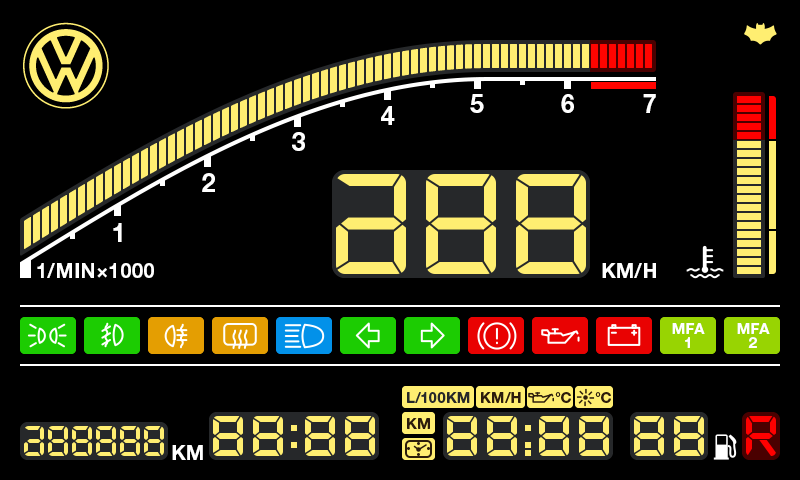
<style>
.page{position:relative;width:800px;height:480px;background:#000000}
.page>*{position:absolute;margin:0}
.t1{font:24px "BMWHelvetica-Bold";color:#ffffff}
.t2{font:19px "BMWHelvetica-Bold";color:#ffffff}
.t3{font:14px/14px "BMWHelvetica-Bold";color:#ffffff}
</style>
<div class="page">
<p class="t1" style="left:470px;top:94px;width:14px;height:19px">5</p>
<p class="t1" style="left:561px;top:94px;width:13px;height:19px">6</p>
<p class="t1" style="left:643px;top:94px;width:13px;height:19px">7</p>
<p class="t1" style="left:381px;top:106px;width:14px;height:19px">4</p>
<p class="t1" style="left:292px;top:132px;width:13px;height:19px">3</p>
<p class="t1" style="left:202px;top:173px;width:13px;height:19px">2</p>
<p class="t1" style="left:113px;top:223px;width:9px;height:19px">1</p>
<p class="t2" style="left:37px;top:263px;width:117px;height:15px">1/MIN×1000</p>
<p class="t2" style="left:602px;top:263px;width:54px;height:15px">KM/H</p>
<p class="t3" style="left:672px;top:323px;width:33px;height:25px;text-align:center">MFA<br>1</p>
<p class="t3" style="left:737px;top:323px;width:33px;height:25px;text-align:center">MFA<br>2</p>
<p class="t2" style="left:172px;top:445px;width:31px;height:15px">KM</p>
</div>
